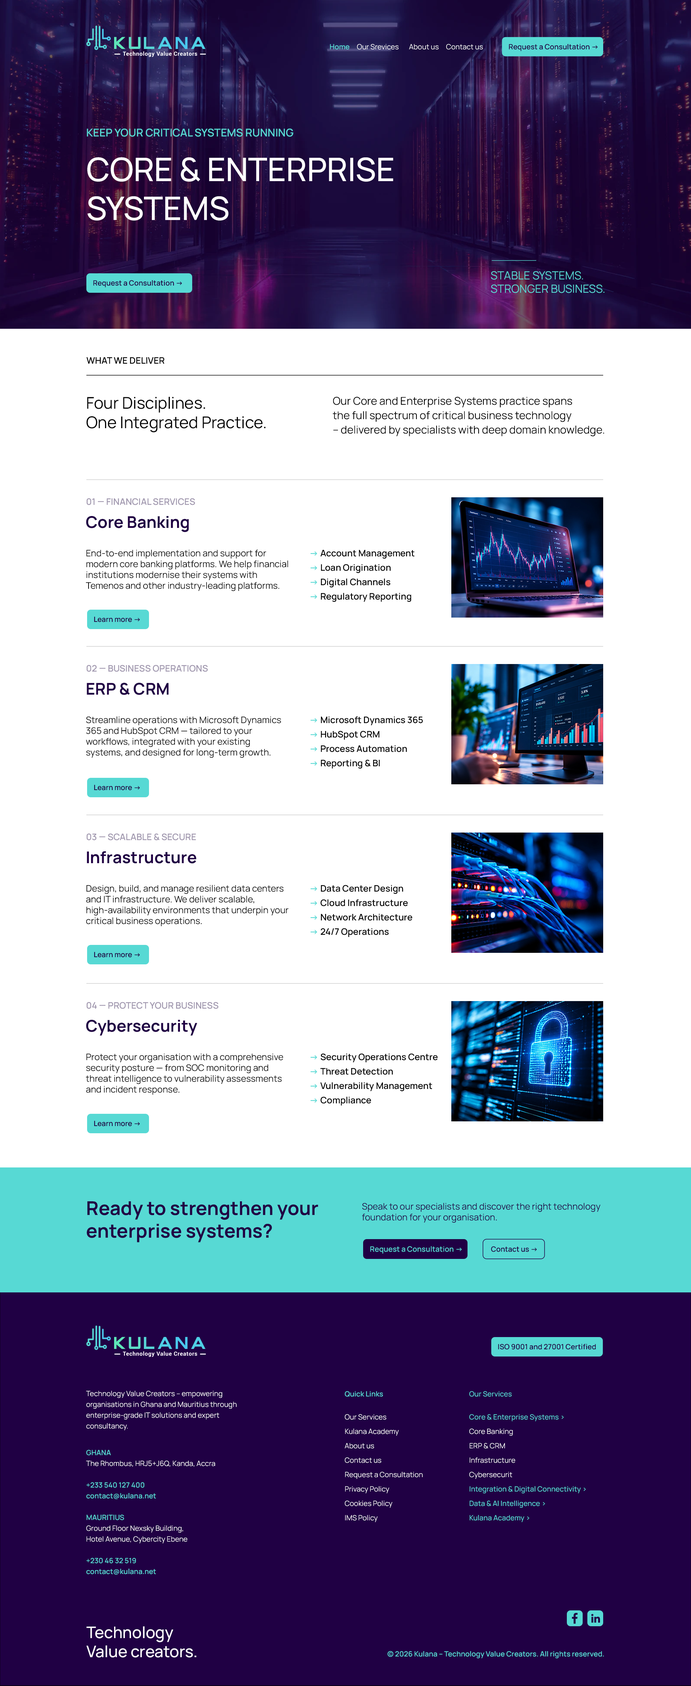
<style>
.page{position:relative;width:691px;height:1686px;background:#ffffff}
.page>*{position:absolute;margin:0}
.t1{font:7.2px "Manrope-Regular";color:#ffffff}
.t2{font:7.2px "Manrope-SemiBold";color:#57d9d4}
.t3{font:7.2px "Manrope-SemiBold";color:#200044}
.t4{font:10.8px "Manrope-SemiBold";color:#57d9d4;text-transform:uppercase}
.t5{font:32.4px "Manrope-Medium";color:#ffffff;text-transform:uppercase}
.t6{font:7.3px "Manrope-SemiBold";color:#200044}
.t7{font:11.3px "Manrope-Regular";color:#57d9d4}
.t8{font:9px "Manrope-SemiBold";color:#000000;text-transform:uppercase}
.t9{font:16.2px "Manrope-Regular";color:#000000}
.t10{font:10.8px/14.4px "Manrope-Regular";color:#000000}
.t11{font:9px "Manrope-SemiBold";color:#a198af;text-transform:uppercase}
.t12{font:16.2px "Manrope-Bold";color:#200044}
.t13{font:9px/10.8px "Manrope-Regular";color:#000000}
.t14{font:9px/14.4px "Manrope-SemiBold";color:#000000}
.t15{font:9px/14.4px "Manrope-Bold";color:#57d9d4}
.t16{font:18.9px "Manrope-Bold";color:#200044}
.t17{font:9px/10.8px "Manrope-Regular";color:#200044}
.t18{font:7.4px "Manrope-SemiBold";color:#57d9d4}
.t19{font:7.2px/10.8px "Manrope-Regular";color:#ffffff}
.t20{font:7.2px/14.4px "Manrope-Regular";color:#ffffff}
.t21{font:7.2px/14.4px "Manrope-Medium";color:#57d9d4}
.t22{font:7.2px "Manrope-Medium";color:#57d9d4}
.t23{font:7.2px/10.8px "Manrope-SemiBold";color:#57d9d4}
.t24{font:15.9px "Manrope-Medium";color:#ffffff}
</style>
<div class="page">
<p class="t1" style="left:330px;top:44px;width:153px;height:6px"><span class="t2">Home </span>    Our Srevices       About us     Contact us</p>
<p class="t3" style="left:509px;top:44px;width:89px;height:7px">Request a Consultation →</p>
<p class="t4" style="left:87px;top:129px;width:206px;height:8px">KEEP YOUR CRITICAL SYSTEMS RUNNING</p>
<p class="t5" style="left:87px;top:157px;width:306px;height:64px">Core &amp; Enterprise <br>Systems</p>
<p class="t6" style="left:93px;top:280px;width:89px;height:7px">Request a Consultation →</p>
<p class="t7" style="left:491px;top:271px;width:114px;height:22px">STABLE SYSTEMS.<br>STRONGER BUSINESS.</p>
<p class="t8" style="left:86px;top:357px;width:79px;height:7px">What We Deliver</p>
<p class="t9" style="left:86px;top:397px;width:180px;height:35px">Four Disciplines. <br>One Integrated Practice.</p>
<p class="t10" style="left:333px;top:397px;width:271px;height:39px">Our Core and Enterprise Systems practice spans <br>the full spectrum of critical business technology <br>– delivered by specialists with deep domain knowledge.</p>
<p class="t11" style="left:86px;top:498px;width:109px;height:7px">01 — FINANCIAL SERVICES</p>
<p class="t12" style="left:86px;top:516px;width:103px;height:16px">Core Banking</p>
<p class="t13" style="left:86px;top:549px;width:202px;height:42px">End-to-end implementation and support for modern core banking platforms. We help financial institutions modernise their systems with Temenos and other industry-leading platforms.</p>
<p class="t14" style="left:311px;top:550px;width:104px;height:52px"><span class="t15">→</span> Account Management<br><span class="t15">→</span> Loan Origination<br><span class="t15">→</span> Digital Channels<br><span class="t15">→</span> Regulatory Reporting</p>
<p class="t6" style="left:94px;top:616px;width:46px;height:6px">Learn more →</p>
<p class="t11" style="left:86px;top:665px;width:122px;height:7px">02 — BUSINESS OPERATIONS</p>
<p class="t12" style="left:87px;top:683px;width:82px;height:12px">ERP &amp; CRM</p>
<p class="t13" style="left:86px;top:716px;width:195px;height:42px">Streamline operations with Microsoft Dynamics 365 and HubSpot CRM — tailored to your workflows, integrated with your existing systems, and designed for long-term growth.</p>
<p class="t14" style="left:311px;top:716px;width:112px;height:53px"><span class="t15">→ </span>Microsoft Dynamics 365<br><span class="t15">→ </span>HubSpot CRM<br><span class="t15">→ </span>Process Automation<br><span class="t15">→ </span>Reporting &amp; BI</p>
<p class="t6" style="left:94px;top:784px;width:46px;height:6px">Learn more →</p>
<p class="t11" style="left:86px;top:833px;width:110px;height:7px">03 — SCALABLE &amp; SECURE</p>
<p class="t12" style="left:87px;top:851px;width:110px;height:12px">Infrastructure</p>
<p class="t13" style="left:86px;top:885px;width:203px;height:41px">Design, build, and manage resilient data centers and IT infrastructure. We deliver scalable, high-availability environments that underpin your critical business operations.</p>
<p class="t14" style="left:311px;top:885px;width:102px;height:52px"><span class="t15">→ </span>Data Center Design<br><span class="t15">→ </span>Cloud Infrastructure<br><span class="t15">→ </span>Network Architecture<br><span class="t15">→ </span>24/7 Operations</p>
<p class="t6" style="left:94px;top:951px;width:46px;height:6px">Learn more →</p>
<p class="t11" style="left:86px;top:1002px;width:133px;height:7px">04 — PROTECT YOUR BUSINESS</p>
<p class="t12" style="left:86px;top:1020px;width:111px;height:15px">Cybersecurity</p>
<p class="t13" style="left:86px;top:1053px;width:197px;height:41px">Protect your organisation with a comprehensive security posture — from SOC monitoring and threat intelligence to vulnerability assessments and incident response.</p>
<p class="t14" style="left:311px;top:1053px;width:127px;height:52px"><span class="t15">→ </span>Security Operations Centre<br><span class="t15">→ </span>Threat Detection<br><span class="t15">→ </span>Vulnerability Management<br><span class="t15">→ </span>Compliance</p>
<p class="t6" style="left:94px;top:1120px;width:46px;height:6px">Learn more →</p>
<p class="t16" style="left:87px;top:1201px;width:231px;height:41px">Ready to strengthen your <br>enterprise systems?</p>
<p class="t17" style="left:362px;top:1202px;width:239px;height:21px">Speak to our specialists and discover the right technology foundation for your organisation.</p>
<p class="t18" style="left:370px;top:1246px;width:92px;height:7px">Request a Consultation →</p>
<p class="t6" style="left:491px;top:1246px;width:46px;height:6px">Contact us →</p>
<p class="t3" style="left:498px;top:1344px;width:98px;height:5px">ISO 9001 and 27001 Certified</p>
<p class="t19" style="left:86px;top:1390px;width:151px;height:40px">Technology Value Creators – empowering organisations in Ghana and Mauritius through enterprise-grade IT solutions and expert consultancy.</p>
<p class="t20" style="left:345px;top:1391px;width:78px;height:131px"><span class="t2">Quick Links<br><br></span>Our Services<br>Kulana Academy<br>About us<br>Contact us<br>Request a Consultation<br>Privacy Policy<br>Cookies Policy<br>IMS Policy</p>
<p class="t21" style="left:469px;top:1391px;width:117px;height:131px"><span class="t22">Our Services<br><br></span>Core &amp; Enterprise Systems &gt;<br><span class="t20">Core Banking<br>ERP &amp; CRM<br>Infrastructure<br>Cybersecurit <br></span>Integration &amp; Digital Connectivity &gt;<br>Data &amp; AI Intelligence &gt;<br>Kulana Academy &gt;</p>
<p class="t19" style="left:86px;top:1449px;width:129px;height:125px"><span class="t23">GHANA<br></span>The Rhombus, HRJ5+J6Q, Kanda, Accra<br><br><span class="t23">+233 540 127 400<br>contact@kulana.net<br><br>MAURITIUS<br></span>Ground Floor Nexsky Building, <br>Hotel Avenue, Cybercity Ebene<br><br><span class="t23">+230 46 32 519<br>contact@kulana.net</span></p>
<p class="t24" style="left:86px;top:1626px;width:111px;height:31px">Technology<br>Value creators.</p>
<p class="t2" style="left:387px;top:1651px;width:217px;height:7px">© 2026 Kulana – Technology Value Creators. All rights reserved.</p>
</div>
